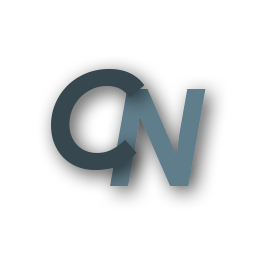
<style>
.page{position:relative;width:256px;height:256px;background:#ffffff}
.page>*{position:absolute;margin:0}
.t1{font:135.3px "ProductSans-BoldItalic";letter-spacing:-0.22em;color:#37474f}
.t2{font:135.3px "ProductSans-BoldItalic";letter-spacing:-0.22em;color:#607d8b}
</style>
<div class="page">
<p class="t1" style="left:51px;top:69px;width:94px;height:101px">C</p>
<p class="t2" style="left:110px;top:89px;width:96px;height:97px">N</p>
</div>
